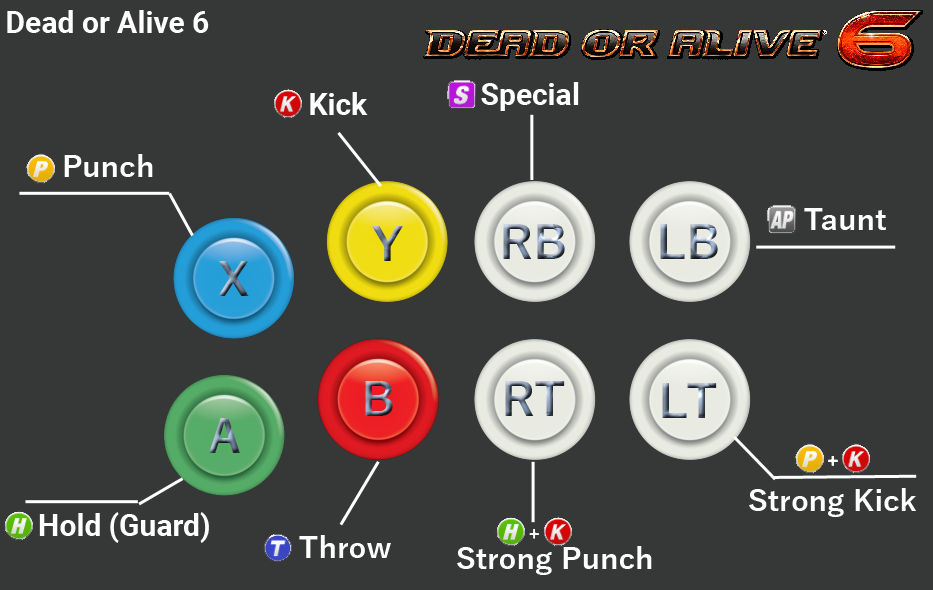
<style>
.page{position:relative;width:933px;height:590px;background:#363838}
.page>*{position:absolute;margin:0}
.t1{font:30px "Roboto-Bold";color:#ffffff}
.t2{font:30px "YuGothic-Bold";color:#ffffff}
</style>
<div class="page">
<p class="t1" style="left:7px;top:10px;width:202px;height:23px">Dead or Alive 6</p>
<p class="t1" style="left:481px;top:82px;width:98px;height:29px">Special</p>
<p class="t1" style="left:310px;top:92px;width:58px;height:23px">Kick</p>
<p class="t2" style="left:64px;top:154px;width:89px;height:23px">Punch</p>
<p class="t2" style="left:804px;top:208px;width:82px;height:22px">Taunt</p>
<p class="t2" style="left:749px;top:488px;width:167px;height:29px">Strong Kick</p>
<p class="t1" style="left:39px;top:512px;width:170px;height:31px">Hold (Guard)</p>
<p class="t2" style="left:299px;top:535px;width:92px;height:23px">Throw</p>
<p class="t2" style="left:457px;top:546px;width:195px;height:29px">Strong Punch</p>
</div>
